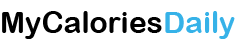
<style>
.page{position:relative;width:245px;height:48px;background:#ffffff}
.page>*{position:absolute;margin:0}
.t1{font:30px "ArialRoundedMTBold";color:#000000}
.t2{font:30px "ArialRoundedMTBold";color:#36b2e8}
</style>
<div class="page">
<p class="t1" style="left:2px;top:11px;width:233px;height:28px">MyCalories<span class="t2">Daily</span></p>
</div>
